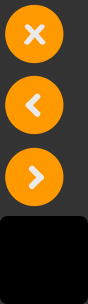
<style>
.page{position:relative;width:88px;height:304px;background:#333333}
.page>*{position:absolute;margin:0}
.t1{font:37.1px "ArialRoundedMTBold";color:#eaeaea;scale:1.21 1}
</style>
<div class="page">
<p class="t1" style="left:24px;top:24px;width:22px;height:21px">x</p>
</div>
